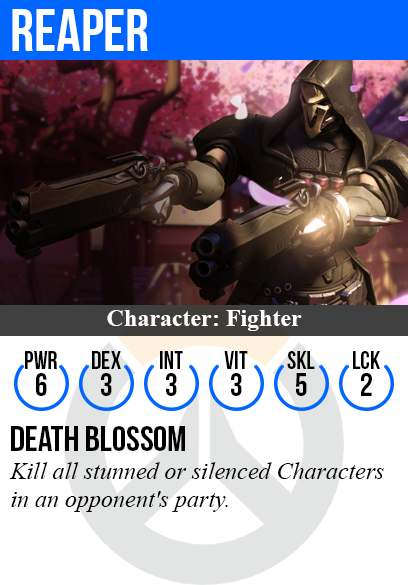
<style>
.page{position:relative;width:408px;height:585px;background:#ffffff}
.page>*{position:absolute;margin:0}
.t1{font:60px "BebasNeue";color:#ffffff}
.t2{font:24px "TimesNewRomanPS-BoldMT";color:#ffffff}
.t3{font:25px "BebasNeue";color:#000000}
.t4{font:32px "BebasNeue";color:#000000}
.t5{font:36px "BebasNeue";color:#000000}
.t6{font:24px "TimesNewRomanPS-ItalicMT";color:#000000}
</style>
<div class="page">
<p class="t1" style="left:12px;top:9px;width:136px;height:42px">reaper</p>
<p class="t2" style="left:107px;top:310px;width:195px;height:21px">Character: Fighter</p>
<p class="t3" style="left:25px;top:351px;width:32px;height:18px">PWR</p>
<p class="t3" style="left:92px;top:351px;width:29px;height:18px">dex</p>
<p class="t3" style="left:160px;top:351px;width:23px;height:18px">int</p>
<p class="t3" style="left:224px;top:351px;width:24px;height:18px">vit</p>
<p class="t3" style="left:287px;top:351px;width:28px;height:18px">skl</p>
<p class="t3" style="left:353px;top:351px;width:27px;height:18px">lck</p>
<p class="t4" style="left:36px;top:373px;width:11px;height:23px">6</p>
<p class="t4" style="left:101px;top:373px;width:11px;height:23px">3</p>
<p class="t4" style="left:166px;top:373px;width:11px;height:23px">3</p>
<p class="t4" style="left:231px;top:373px;width:11px;height:23px">3</p>
<p class="t4" style="left:296px;top:373px;width:11px;height:23px">5</p>
<p class="t4" style="left:361px;top:373px;width:11px;height:23px">2</p>
<p class="t5" style="left:11px;top:426px;width:174px;height:25px">death blossom</p>
<p class="t6" style="left:9px;top:462px;width:375px;height:50px">Kill all stunned or silenced Characters<br>in an opponent's party.</p>
</div>
